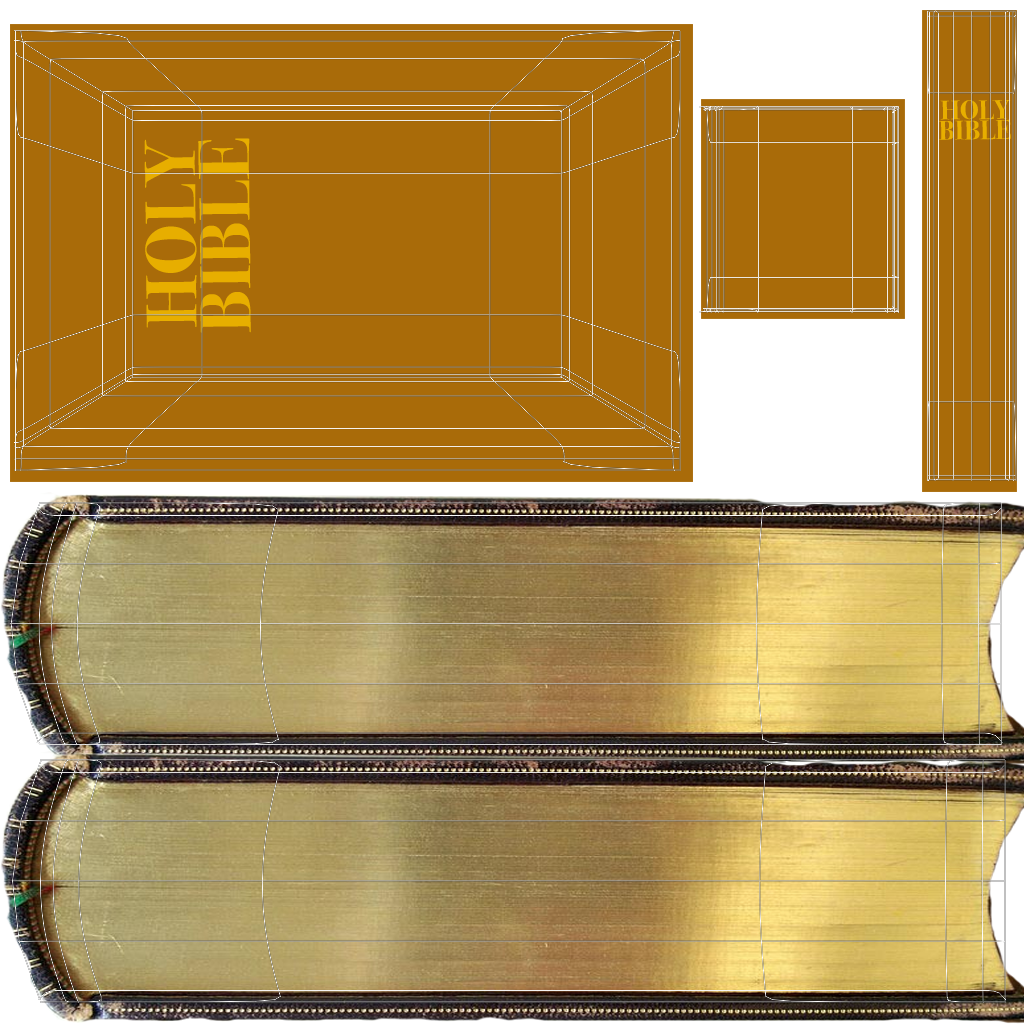
<style>
.page{position:relative;width:1024px;height:1024px;background:#a96b09}
.page>*{position:absolute;margin:0}
.t1{font:26.7px/20px "BodoniSvtyTwoITCTT-Bold";color:#e7ae00}
.t2{font:72px/54px "BodoniSvtyTwoITCTT-Bold";color:#e7ae00}
</style>
<div class="page">
<p class="t1" style="left:938px;top:100px;width:73px;height:40px;text-align:center;rotate:-1deg">HOLY <br>BIBLE</p>
<p class="t2" style="left:144px;top:138px;width:107px;height:195px;text-align:center;rotate:-91deg">HOLY <br>BIBLE</p>
</div>
